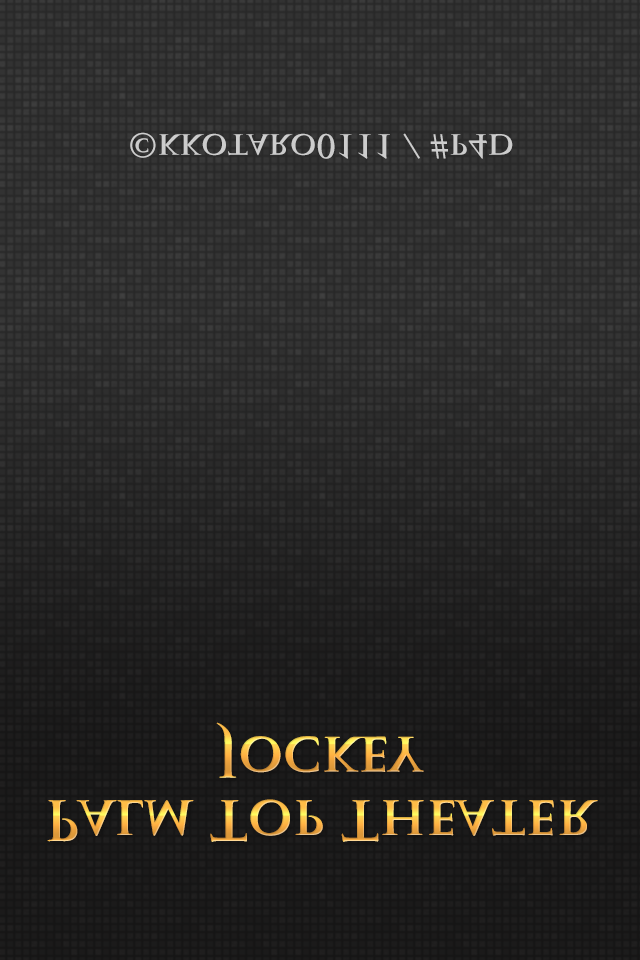
<style>
.page{position:relative;width:640px;height:960px}
.page>*{position:absolute;margin:0}
.t1{font:32px "TrajanPro-Bold";color:#cccccc}
.t2{font:54px "TrajanPro-Bold"}
</style>
<div class="page">
<p class="t1" style="left:130px;top:132px;width:383px;height:27px">©kkotaro0111 / #p4d</p>
<p class="t2" style="left:216px;top:722px;width:208px;height:56px">Jockey</p>
<p class="t2" style="left:47px;top:799px;width:551px;height:43px">Palm Top Theater</p>
</div>
